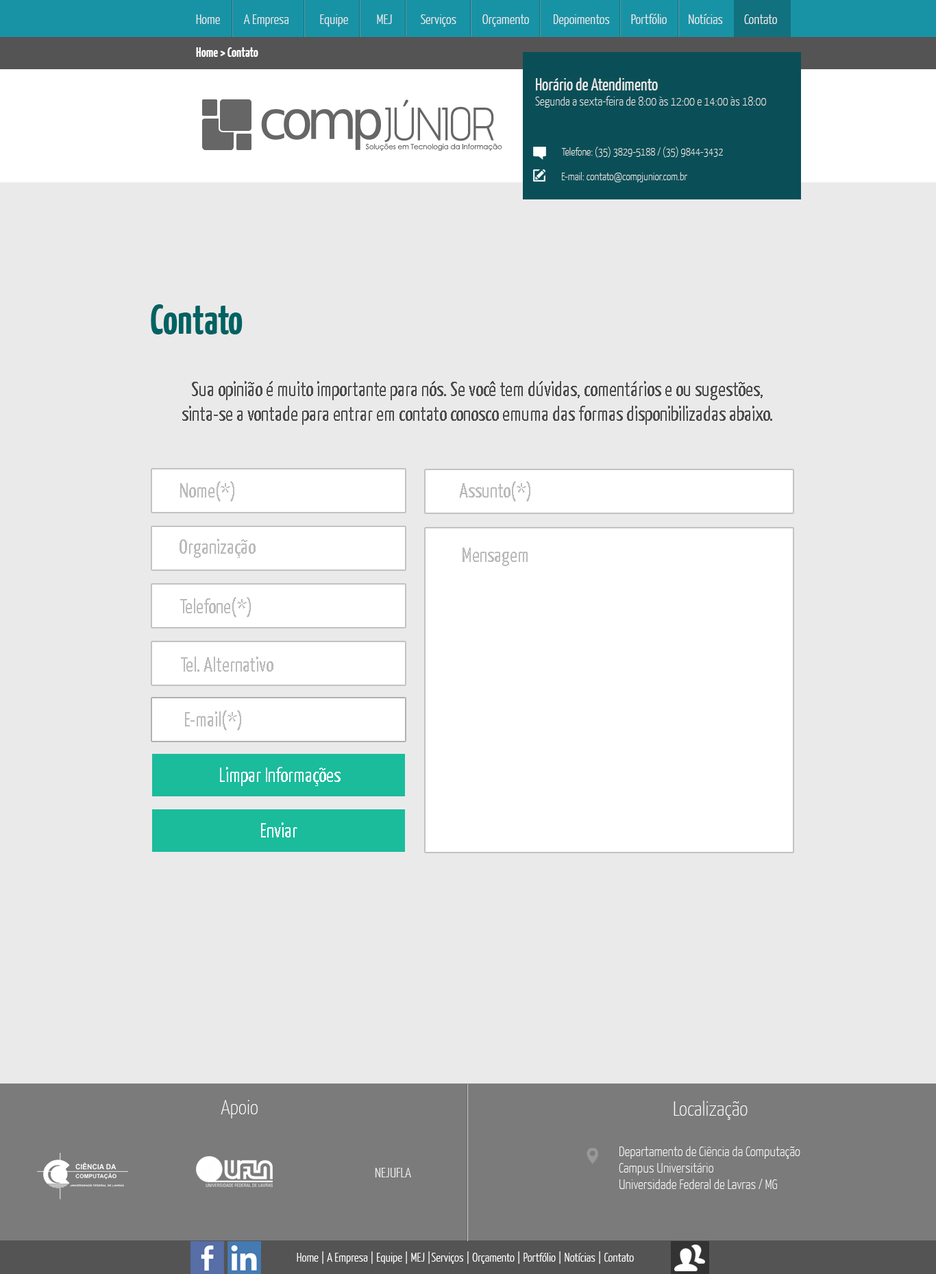
<style>
.page{position:relative;width:936px;height:1274px;background:#eaeaea}
.page>*{position:absolute;margin:0}
.t1{font:13.7px "YanoneKaffeesatz-Light";color:#eaeaea}
.t2{font:17.1px "YanoneKaffeesatz-Light";color:#999999}
.t3{font:13.7px "YanoneKaffeesatz-Bold";color:#fffdfd}
.t4{font:12.3px "YanoneKaffeesatz-ExtraLight";color:#eaeaea}
.t5{font:17.1px "YanoneKaffeesatz-Regular";color:#eaeaea}
.t6{font:11px "YanoneKaffeesatz-ExtraLight";color:#eaeaea}
.t7{font:13.7px "YanoneKaffeesatz-ExtraLight";color:#eaeaea}
.t8{font:41.1px "YanoneKaffeesatz-Bold";color:#006263}
.t9{font:20.6px "YanoneKaffeesatz-Regular";color:#4d4d4d}
.t10{font:20.6px "YanoneKaffeesatz-Regular";color:#bababa}
.t11{font:20.6px "YanoneKaffeesatz-Regular";color:#ffffff}
.t12{font:20.6px "YanoneKaffeesatz-Regular";color:#fffefe}
.t13{font:20.6px "YanoneKaffeesatz-ExtraLight";color:#ffffff}
.t14{font:20.6px "YanoneKaffeesatz-ExtraLight";color:#fefefe}
.t15{font:13.7px "YanoneKaffeesatz-ExtraLight";color:#ffffff}
.t16{font:12.3px "YanoneKaffeesatz-Light";color:#ffffff}
</style>
<div class="page">
<p class="t1" style="left:196px;top:14px;width:581px;height:13px"><span class="t2"> </span>Home          A Empresa             Equipe            MEJ            Serviços           Orçamento          Depoimentos         Portfólio         Notícias         Contato</p>
<p class="t3" style="left:196px;top:47px;width:62px;height:10px">Home &gt; Contato</p>
<p class="t4" style="left:535px;top:77px;width:231px;height:31px"><span class="t5">Horário de Atendimento<br></span>Segunda a sexta-feira de 8:00 às 12:00 e 14:00 às 18:00</p>
<p class="t6" style="left:561px;top:147px;width:162px;height:11px"><span class="t7"><br></span>Telefone: (35) 3829-5188 / (35) 9844-3432</p>
<p class="t6" style="left:562px;top:172px;width:125px;height:10px"><span class="t7"><br></span>E-mail: contato@compjunior.com.br</p>
<p class="t8" style="left:151px;top:304px;width:92px;height:30px">Contato</p>
<p class="t9" style="left:182px;top:381px;width:590px;height:44px;text-align:center">Sua opinião é muito importante para nós. Se você tem dúvidas, comentários e ou sugestões,<br>sinta-se a vontade para entrar em contato conosco emuma das formas disponibilizadas abaixo.</p>
<p class="t10" style="left:180px;top:481px;width:54px;height:21px">Nome(*)</p>
<p class="t10" style="left:459px;top:481px;width:71px;height:21px">Assunto(*)</p>
<p class="t10" style="left:180px;top:539px;width:76px;height:19px">Organização</p>
<p class="t10" style="left:463px;top:548px;width:65px;height:18px">Mensagem</p>
<p class="t10" style="left:180px;top:597px;width:71px;height:20px">Telefone(*)</p>
<p class="t10" style="left:181px;top:656px;width:92px;height:16px">Tel. Alternativo</p>
<p class="t10" style="left:185px;top:710px;width:56px;height:20px">E-mail(*)</p>
<p class="t11" style="left:220px;top:767px;width:121px;height:19px">Limpar Informações</p>
<p class="t12" style="left:261px;top:822px;width:36px;height:15px">Enviar</p>
<p class="t13" style="left:221px;top:1100px;width:37px;height:18px">Apoio</p>
<p class="t14" style="left:674px;top:1101px;width:74px;height:19px">Localização</p>
<p class="t15" style="left:619px;top:1146px;width:181px;height:43px">Departamento de Ciência da Computação<br>Campus Universitário<br>Universidade Federal de Lavras / MG</p>
<p class="t1" style="left:375px;top:1168px;width:36px;height:9px">NEJUFLA</p>
<p class="t16" style="left:297px;top:1251px;width:337px;height:13px"><span class="t2"> </span>Home | A Empresa | Equipe | MEJ |Serviços | Orçamento | Portfólio | Notícias | Contato</p>
</div>
